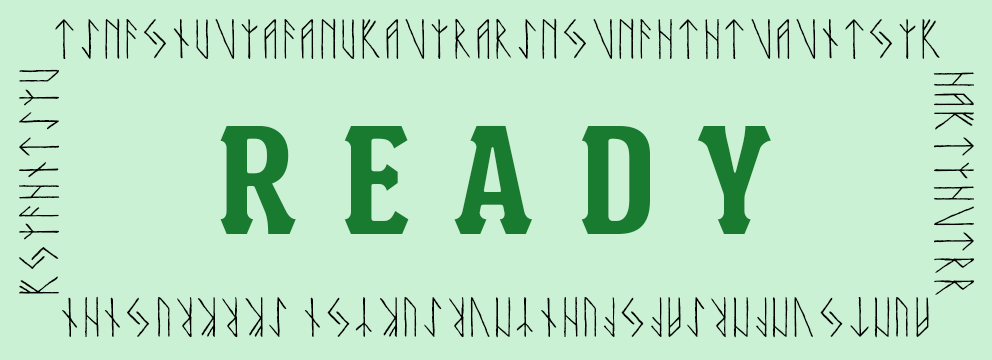
<style>
.page{position:relative;width:992px;height:360px;background:#cbf1d4}
.page>*{position:absolute;margin:0}
.t1{font:50px "FUTHARKVIKINGS";letter-spacing:0.05em;color:#000000}
.t2{font:150px "BatakCondensedITCStd-Bold";letter-spacing:0.3em;color:#197b30}
</style>
<div class="page">
<p class="t1" style="left:19px;top:18px;width:956px;height:320px;text-align:center">skrkrugihikgyfhitsyutsnfgiuvyafanukavyrarsngvnfhthtvavitgykhaktyhvtrrauntgvnfnrsafgfuhiynvrsukygiufikssh</p>
<p class="t2" style="left:220px;top:125px;width:551px;height:109px">READY</p>
</div>
